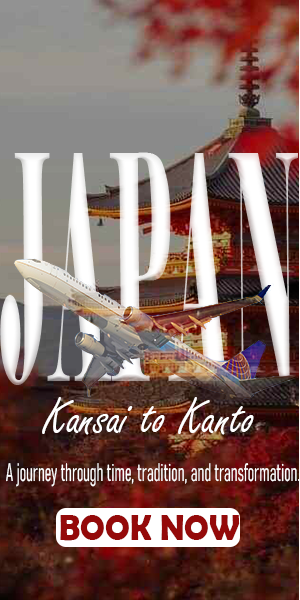
<style>
.page{position:relative;width:300px;height:600px}
.page>*{position:absolute;margin:0}
.t1{font:54.5px "FreestyleScript-Regular";color:#ffffff;scale:0.96 1}
.t2{font:25px "Bahnschrift-LightCondensed";color:#ffffff;scale:0.67 1}
.t3{font:37px "BerlinSansFBDemi-Bold";color:#940a0a;scale:0.89 1}
</style>
<div class="page">
<p class="t1" style="left:42px;top:397px;width:212px;height:38px">Kansai to Kanto</p>
<p class="t2" style="left:6px;top:463px;width:294px;height:24px">A journey through time, tradition, and transformation.</p>
<p class="t3" style="left:60px;top:515px;width:180px;height:26px">BOOK NOW</p>
</div>
